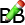
<style>
.page{position:relative;width:25px;height:25px;background:#ffffff}
.page>*{position:absolute;margin:0}
.t1{font:19.8px "Verdana";color:#000000}
</style>
<div class="page">
<p class="t1" style="left:0px;top:8px;width:12px;height:15px">B</p>
<p class="t1" style="left:13px;top:8px;width:12px;height:15px">B</p>
</div>
